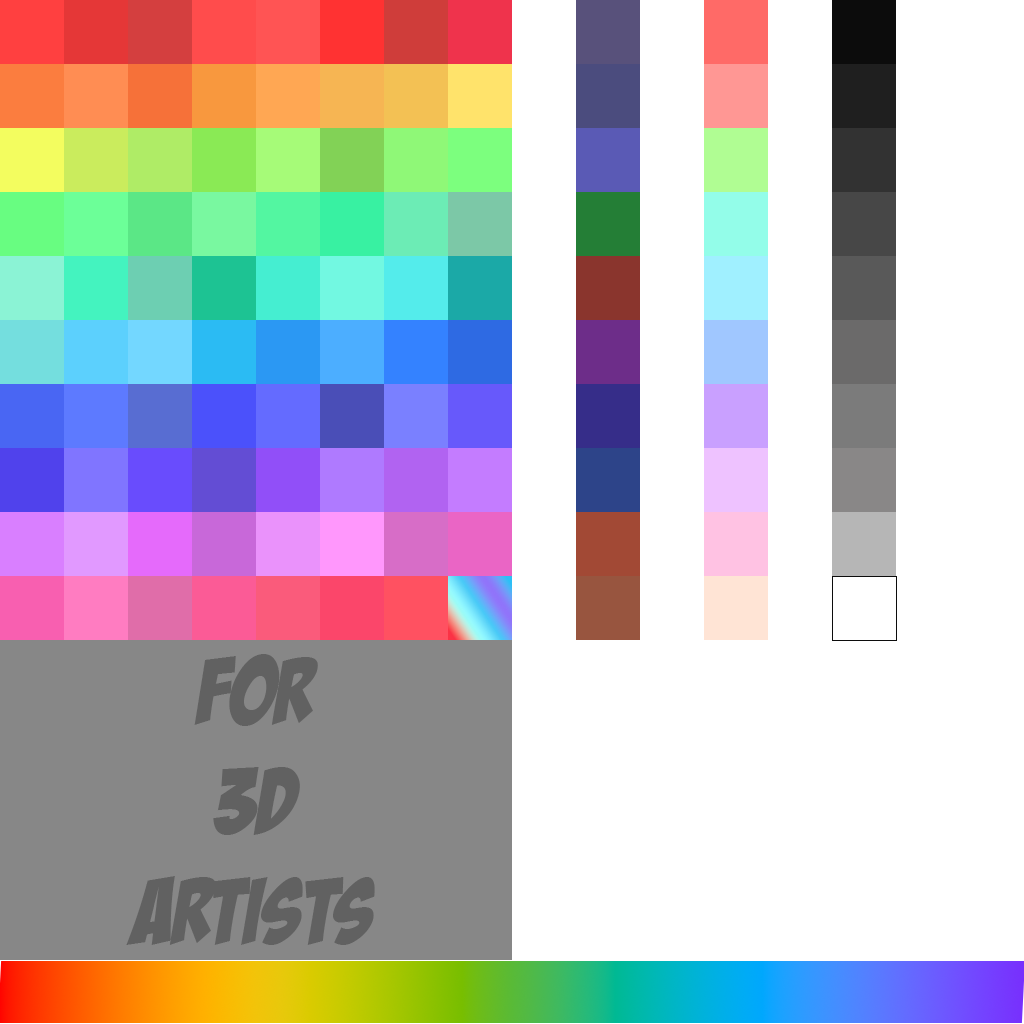
<style>
.page{position:relative;width:1024px;height:1024px;background:#ffffff}
.page>*{position:absolute;margin:0}
.t1{font:91.7px "BadaBoomBB";color:#616161}
</style>
<div class="page">
<p class="t1" style="left:126px;top:654px;width:249px;height:291px;text-align:center">FOR<br>3D<br>ARTISTS</p>
</div>
